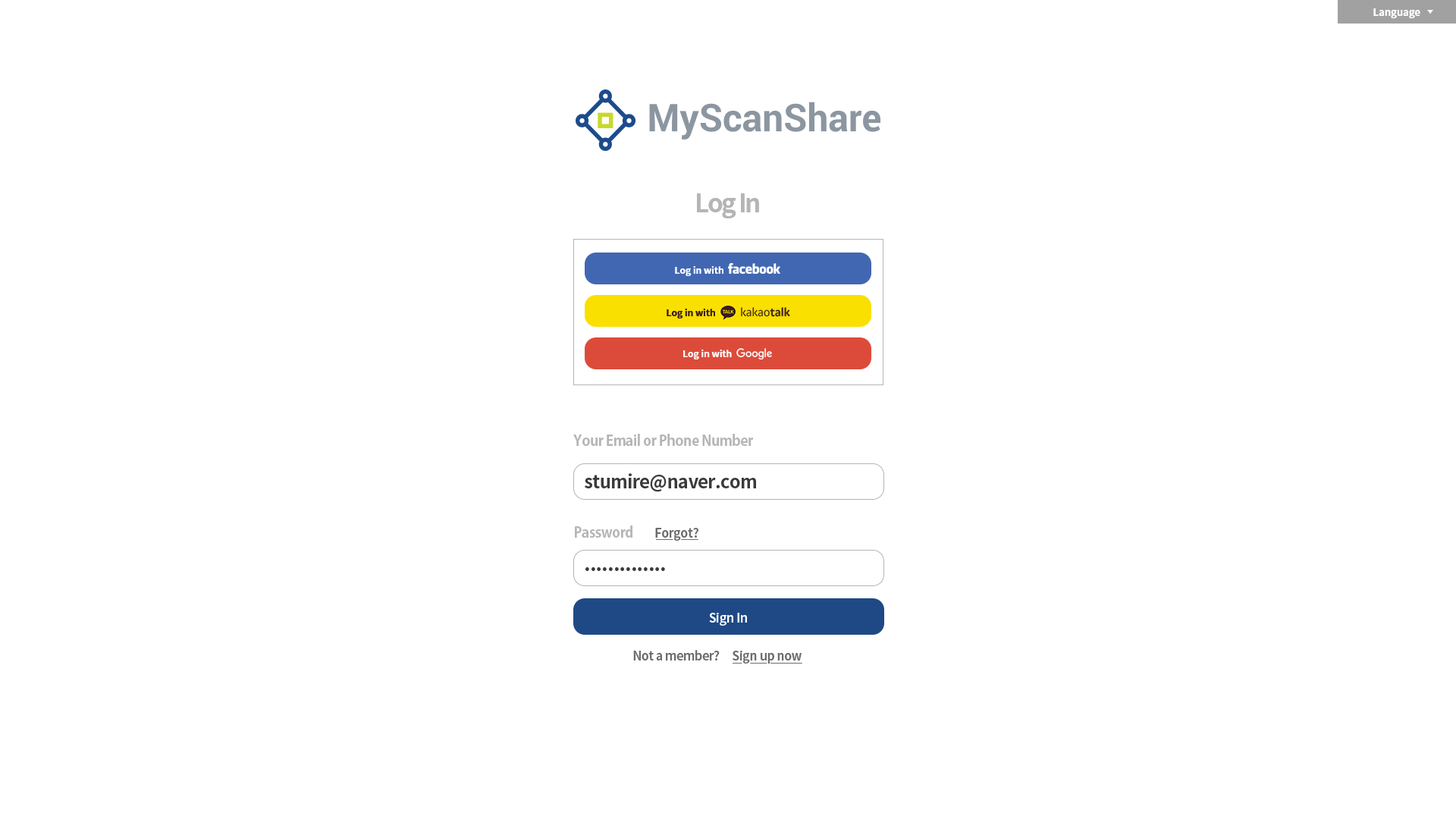
<style>
.page{position:relative;width:1456px;height:819px;background:#ffffff}
.page>*{position:absolute;margin:0}
.t1{font:9.9px "NotoSansKR-Bold";color:#ffffff}
.t2{font:25.2px "NotoSansKR-Bold";letter-spacing:-0.075em;color:#b5b5b5}
.t3{font:9.1px "NotoSansKR-Bold";color:#ffffff}
.t4{font:9.1px "NotoSansKR-Bold";color:#3b1e1e}
.t5{font:14.5px "AdobeGothicStd-Bold";letter-spacing:-0.025em;color:#b5b5b5}
.t6{font:18.2px "NotoSansKR-Bold";letter-spacing:-0.025em;color:#3a3a3a}
.t7{font:12.4px "NotoSansKR-Bold";letter-spacing:-0.025em;color:#6d6d6d}
.t8{font:19.8px "NotoSansKR-Bold";letter-spacing:-0.025em;color:#3a3a3a}
.t9{font:12.4px "NotoSansKR-Bold";letter-spacing:-0.025em;color:#ffffff}
</style>
<div class="page">
<p class="t1" style="left:1373px;top:8px;width:47px;height:11px">Language</p>
<p class="t2" style="left:697px;top:193px;width:62px;height:25px">Log In</p>
<p class="t3" style="left:675px;top:266px;width:48px;height:10px">Log in with</p>
<p class="t4" style="left:667px;top:309px;width:48px;height:9px">Log in with</p>
<p class="t3" style="left:683px;top:350px;width:49px;height:9px">Log in with</p>
<p class="t5" style="left:573px;top:434px;width:180px;height:12px">Your Email or Phone Number</p>
<p class="t6" style="left:585px;top:473px;width:171px;height:19px">stumire@naver.com</p>
<p class="t5" style="left:575px;top:526px;width:57px;height:12px">Password</p>
<p class="t7" style="left:655px;top:528px;width:43px;height:13px">Forgot?</p>
<p class="t8" style="left:585px;top:567px;width:80px;height:4px">..............</p>
<p class="t9" style="left:709px;top:613px;width:38px;height:13px">Sign In</p>
<p class="t7" style="left:633px;top:650px;width:169px;height:14px">Not a member?     Sign up now</p>
</div>
